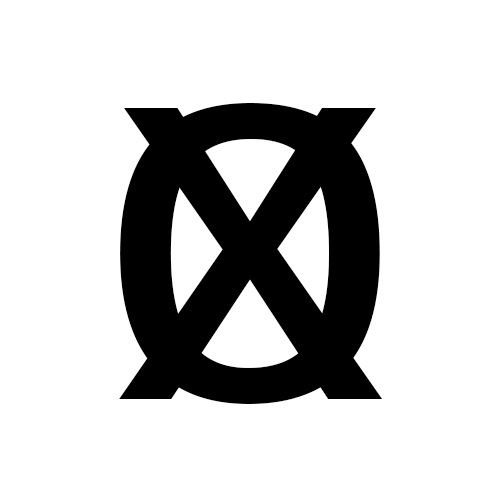
<style>
.page{position:relative;width:500px;height:500px;background:#ffffff}
.page>*{position:absolute;margin:0}
.t1{font:549.9px "Arimo";color:#000000}
</style>
<div class="page">
<p class="t1" style="left:119px;top:108px;width:264px;height:291px">x</p>
<p class="t1" style="left:120px;top:103px;width:260px;height:301px">o</p>
</div>
